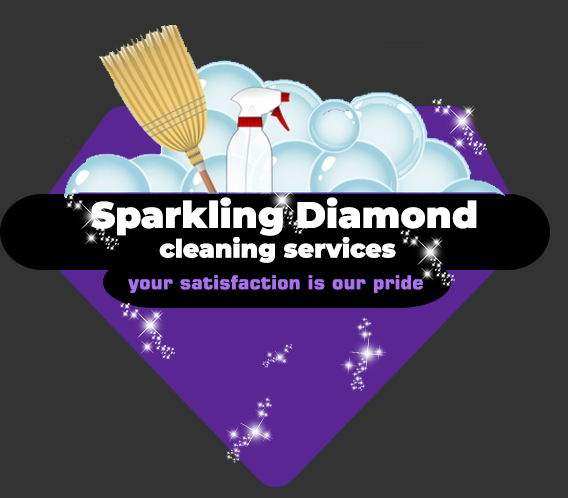
<style>
.page{position:relative;width:568px;height:498px;background:#333333}
.page>*{position:absolute;margin:0}
.t1{font:37px "Montserrat-Black";color:#ffffff}
.t2{font:25px "Montserrat-Black";color:#fffefe}
.t3{font:19px "Square721BT-Bold";color:#ab70ef;scale:1.05 1}
</style>
<div class="page">
<p class="t1" style="left:91px;top:197px;width:386px;height:39px">Sparkling Diamond</p>
<p class="t2" style="left:159px;top:237px;width:237px;height:26px">cleaning services</p>
<p class="t3" style="left:128px;top:275px;width:295px;height:18px">your satisfaction is our pride</p>
</div>
